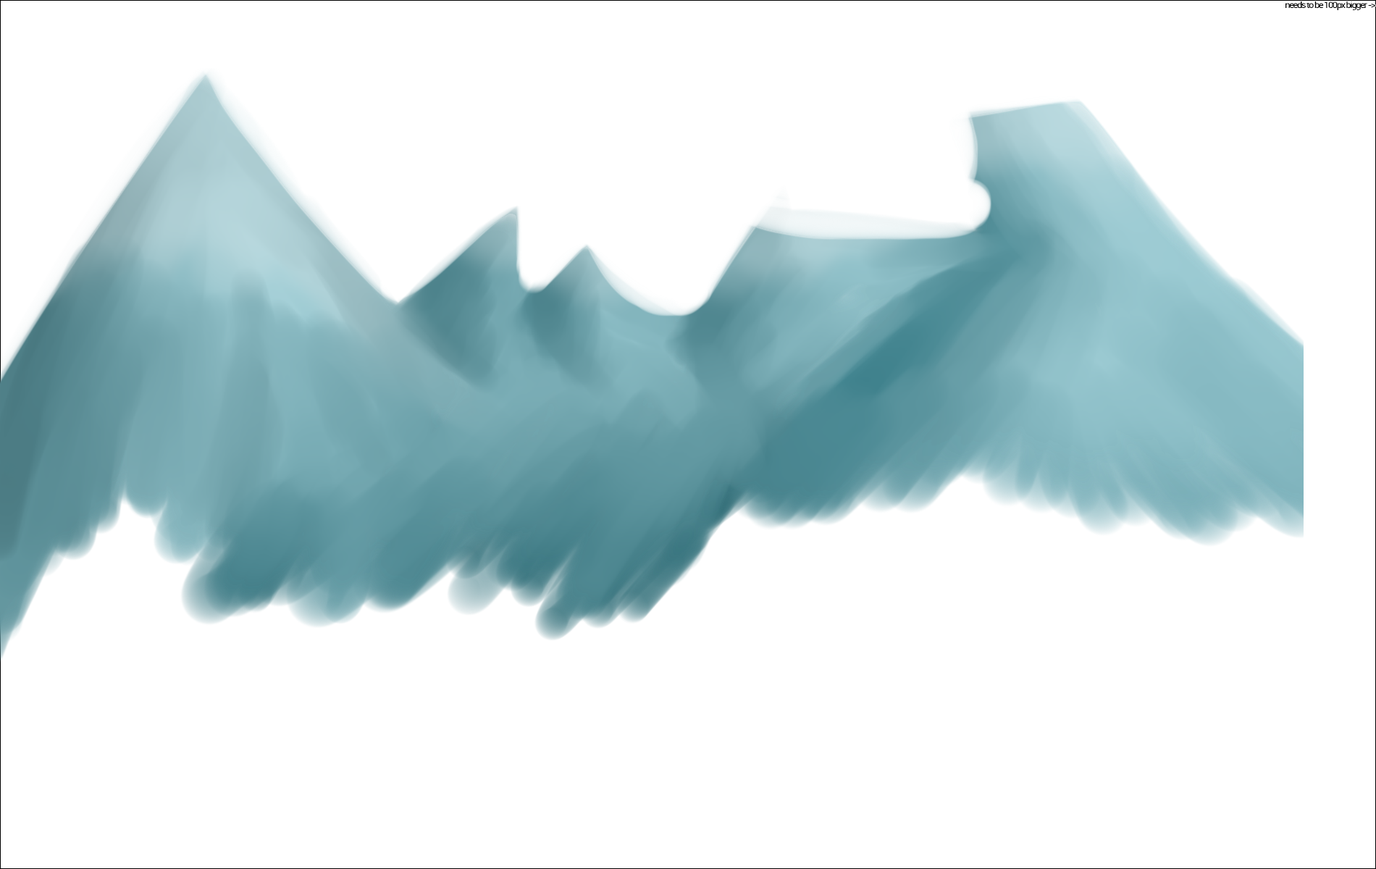
<style>
.page{position:relative;width:1376px;height:869px;background:#ffffff}
.page>*{position:absolute;margin:0}
.t1{font:9px "Roboto-Regular";letter-spacing:-0.1em;color:#000000}
</style>
<div class="page">
<p class="t1" style="left:1285px;top:1px;width:91px;height:9px">needs to be 100px bigger -&gt;</p>
</div>
